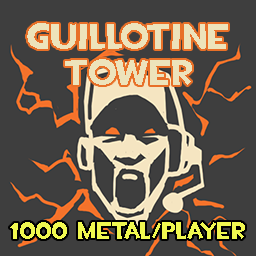
<style>
.page{position:relative;width:256px;height:256px;background:#3e3e3e}
.page>*{position:absolute;margin:0}
.t1{font:36px/36px "TF2Build";color:#ede3bb}
.t2{font:24px "TF2Build";color:#f0f850}
</style>
<div class="page">
<p class="t1" style="left:27px;top:23px;width:201px;height:62px;text-align:center">Guillotine<br>Tower</p>
<p class="t2" style="left:10px;top:222px;width:235px;height:17px">1000 metal/player</p>
</div>
